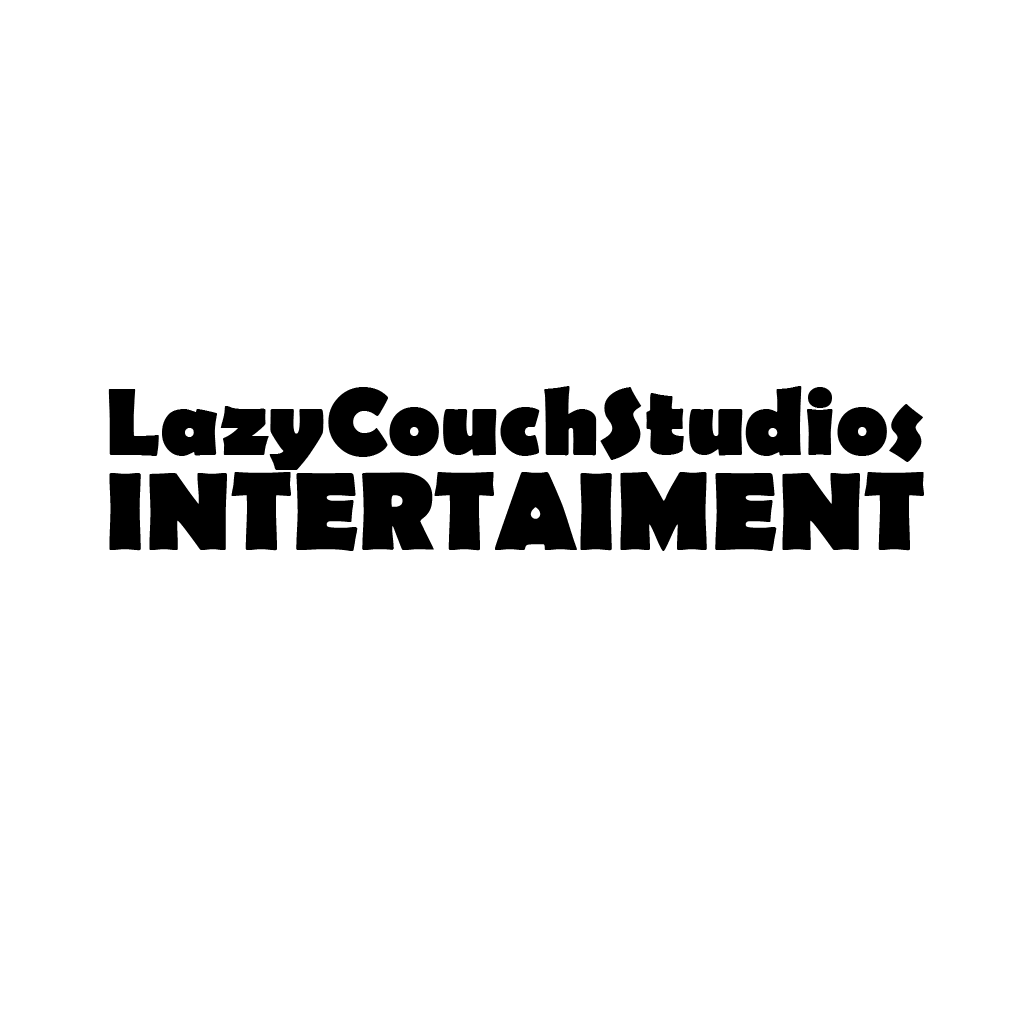
<style>
.page{position:relative;width:1024px;height:1024px;background:#ffffff}
.page>*{position:absolute;margin:0}
.t1{font:96px/95px "BerlinSansFB-Bold";color:#000000}
.t2{font:111.9px/95px "BerlinSansFB-Bold";color:#000000}
</style>
<div class="page">
<p class="t1" style="left:108px;top:386px;width:816px;height:165px;text-align:justify">LazyCouchStudios<br><span class="t2">INTERTAIMENT</span></p>
</div>
